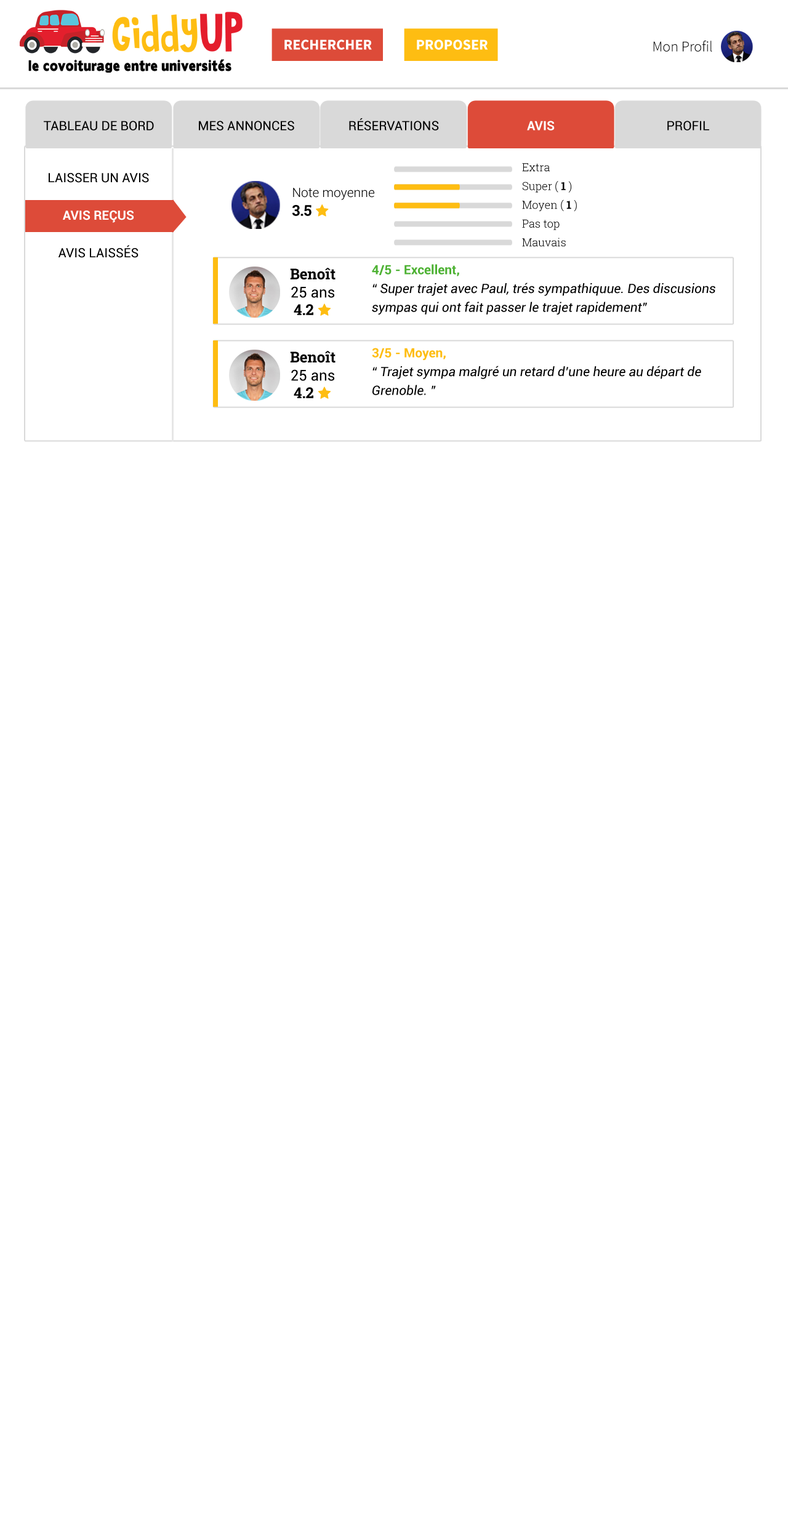
<style>
.page{position:relative;width:788px;height:1513px;background:#ffffff}
.page>*{position:absolute;margin:0}
.t1{font:14.8px "SourceSansPro-Bold";color:#ffffff;text-transform:uppercase}
.t2{font:14.8px "SourceSansPro-Light";color:#000000}
.t3{font:12.9px "Roboto-Regular";color:#000000;text-transform:uppercase}
.t4{font:12.9px "Roboto-Bold";color:#ffffff;text-transform:uppercase}
.t5{font:12.9px/18.8px "Roboto-Regular";color:#000000;text-transform:uppercase}
.t6{font:12.9px/18.8px "Roboto-Bold";color:#ffffff;text-transform:uppercase}
.t7{font:11.1px/18.8px "RobotoSlab-Light";color:#000000}
.t8{font:11.1px/18.8px "RobotoSlab-Bold";color:#000000}
.t9{font:14.8px/18.2px "RobotoSlab-Bold";color:#000000}
.t10{font:14.8px/18.2px "Roboto-Regular";color:#000000}
.t11{font:12.9px/18.8px "Roboto-Italic";color:#000000}
.t12{font:12.9px/18.8px "Roboto-Bold";color:#4eb234}
.t13{font:12.9px/18.8px "Roboto-Bold";color:#febd12}
</style>
<div class="page">
<p class="t1" style="left:284px;top:39px;width:88px;height:11px">Rechercher</p>
<p class="t1" style="left:417px;top:39px;width:71px;height:11px">proposer</p>
<p class="t2" style="left:653px;top:41px;width:59px;height:11px">Mon Profil</p>
<p class="t3" style="left:44px;top:121px;width:110px;height:10px">tableau de bord</p>
<p class="t3" style="left:199px;top:121px;width:95px;height:10px">mes annonces</p>
<p class="t3" style="left:349px;top:118px;width:90px;height:13px">réservations</p>
<p class="t4" style="left:527px;top:121px;width:28px;height:10px">avis</p>
<p class="t3" style="left:667px;top:121px;width:42px;height:10px">profil</p>
<p class="t5" style="left:49px;top:173px;width:100px;height:85px;text-align:center">laisser un avis<br><br><span class="t6">avis reçus<br></span><br>avis laissés</p>
<p class="t7" style="left:522px;top:163px;width:55px;height:84px">Extra<br>Super ( <span class="t8">1</span> )<br>Moyen ( <span class="t8">1</span> )<br>Pas top<br>Mauvais</p>
<p class="t9" style="left:290px;top:268px;width:46px;height:30px;text-align:center">Benoît<br><span class="t10">25 ans</span></p>
<p class="t11" style="left:372px;top:264px;width:343px;height:51px"><span class="t12">4/5 - Excellent,<br></span>“ Super trajet avec Paul, trés sympathiquue. Des discusions sympas qui ont fait passer le trajet rapidement”</p>
<p class="t9" style="left:290px;top:351px;width:46px;height:30px;text-align:center">Benoît<br><span class="t10">25 ans</span></p>
<p class="t11" style="left:372px;top:348px;width:329px;height:47px"><span class="t13">3/5 - Moyen,<br></span>“ Trajet sympa malgré un retard d’une heure au départ de Grenoble. ”</p>
</div>
